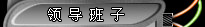
<style>
.page{position:relative;width:205px;height:27px}
.page>*{position:absolute;margin:0}
.t1{font:14px "SimSun";color:#ffffff}
</style>
<div class="page">
<p class="t1" style="left:48px;top:8px;width:76px;height:13px">领 导 班 子</p>
</div>
